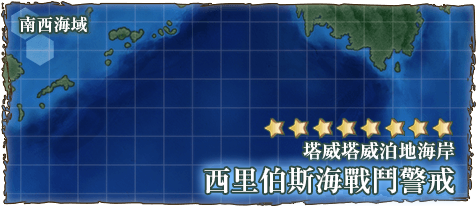
<style>
.page{position:relative;width:476px;height:206px}
.page>*{position:absolute;margin:0}
.t1{font:17px "RyuminPr6N-ExBold";color:#ffffff}
.t2{font:19px "RyuminPro-ExBold";color:#ffffff}
.t3{font:28px "RyuminPro-ExBold";color:#ffffff}
</style>
<div class="page">
<p class="t1" style="left:19px;top:16px;width:68px;height:17px">南西海域</p>
<p class="t2" style="left:303px;top:141px;width:152px;height:19px">塔威塔威泊地海岸</p>
<p class="t3" style="left:204px;top:167px;width:250px;height:27px">西里伯斯海戰鬥警戒</p>
</div>
